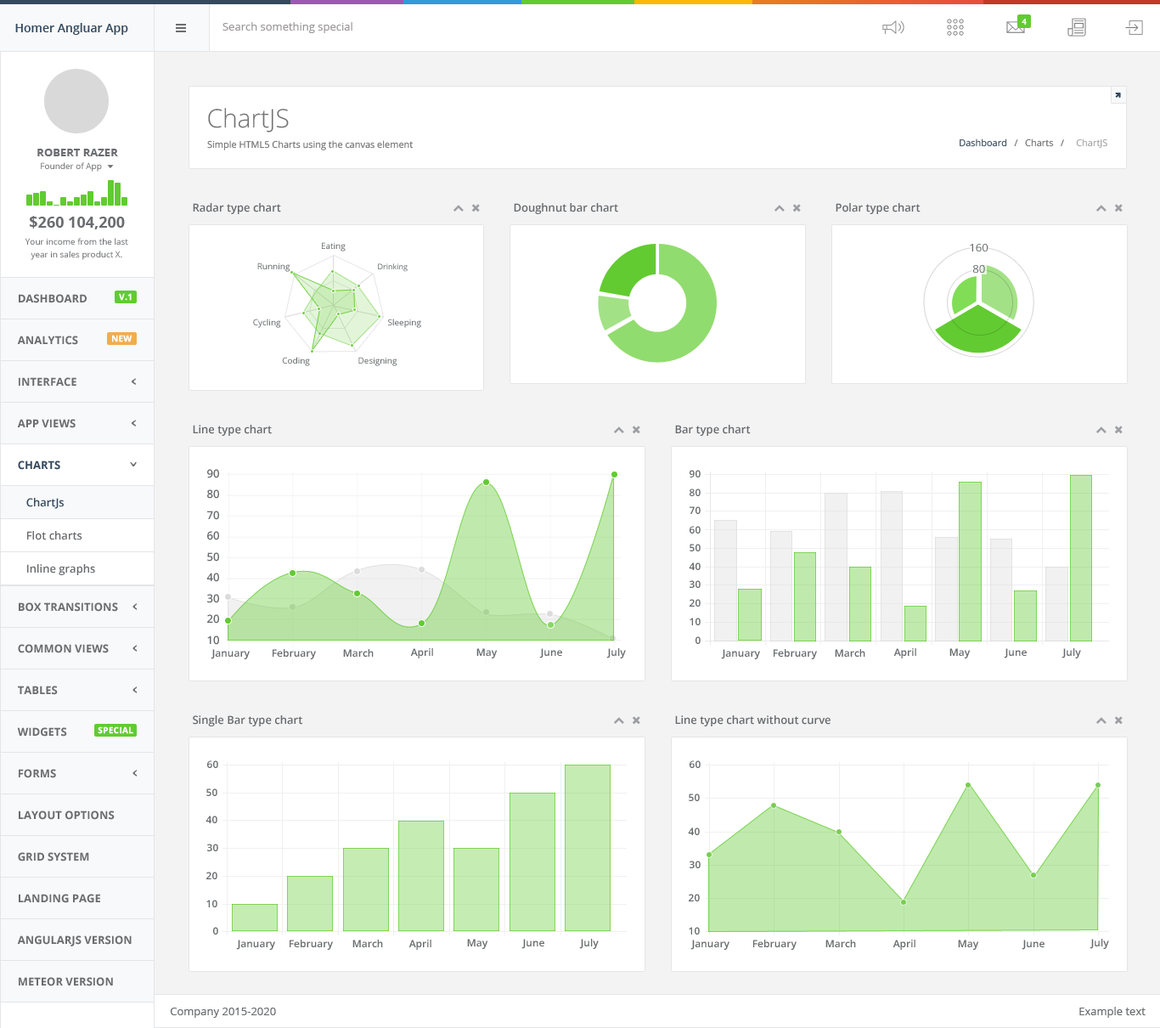
<style>
.page{position:relative;width:1160px;height:1028px;background:#ffffff}
.page>*{position:absolute;margin:0}
.t1{font:11.9px "OpenSans-Semibold";color:#34495e}
.t2{font:11px "OpenSans";color:#9c9999}
.t3{font:8.5px "OpenSans-Bold";color:#ffffff}
.t4{font:25.5px "OpenSans-Light";color:#727173}
.t5{font:11px "OpenSans-Bold";color:#6a6c6f}
.t6{font:9.3px "OpenSans";color:#727173}
.t7{font:9.3px "OpenSans";color:#3c4d60}
.t8{font:9.3px "OpenSans";color:#a5a6a9}
.t9{font:8.5px "OpenSans";color:#6a6c6f}
.t10{font:11px "OpenSans-Semibold";color:#676a6c}
.t11{font:15.3px "OpenSans-Bold";color:#6a6c6f}
.t12{font:8.5px/12.7px "OpenSans";color:#6a6c6f}
.t13{font:8.5px "OpenSans";color:#676a6c}
.t14{font:10.7px "OpenSans";color:#676a6c;scale:1.05 1}
.t15{font:7.6px "OpenSans"}
.t16{font:8.5px "OpenSans-Bold";color:#ffffff;font-weight:bold}
.t17{font:11px "OpenSans-Bold";color:#34495e}
.t18{font:10.2px "OpenSans-Semibold";color:#676a6c}
.t19{font:11px "OpenSans-Semibold";color:#34495e}
.t20{font:11px "OpenSans-Semibold";color:#6a6c6f}
.t21{font:11px "OpenSans";color:#6a6c6f}
</style>
<div class="page">
<p class="t1" style="left:15px;top:23px;width:113px;height:12px">Homer Angluar App</p>
<p class="t2" style="left:223px;top:22px;width:129px;height:11px">Search something special</p>
<p class="t3" style="left:1022px;top:19px;width:5px;height:6px">4</p>
<p class="t4" style="left:208px;top:108px;width:81px;height:25px">ChartJS</p>
<p class="t5" style="left:37px;top:149px;width:81px;height:7px">ROBERT RAZER</p>
<p class="t6" style="left:207px;top:140px;width:207px;height:10px">Simple HTML5 Charts using the canvas element</p>
<p class="t6" style="left:960px;top:138px;width:148px;height:11px"><span class="t7">Dashboard</span>   /   Charts   /    <span class="t8"> ChartJS</span></p>
<p class="t9" style="left:41px;top:162px;width:61px;height:10px">Founder of App</p>
<p class="t10" style="left:193px;top:203px;width:88px;height:11px">Radar type chart</p>
<p class="t10" style="left:514px;top:203px;width:104px;height:11px">Doughnut bar chart</p>
<p class="t10" style="left:836px;top:203px;width:85px;height:11px">Polar type chart</p>
<p class="t11" style="left:30px;top:216px;width:95px;height:13px">$260 104,200</p>
<p class="t12" style="left:25px;top:238px;width:103px;height:22px;text-align:center">Your income from the last<br>year in sales product X.</p>
<p class="t13" style="left:322px;top:242px;width:24px;height:9px">Eating</p>
<p class="t14" style="left:970px;top:244px;width:19px;height:7px">160</p>
<p class="t13" style="left:257px;top:262px;width:33px;height:10px">Running</p>
<p class="t15" style="left:378px;top:263px;width:30px;height:9px">Drinking</p>
<p class="t14" style="left:973px;top:265px;width:12px;height:8px">80</p>
<p class="t5" style="left:19px;top:294px;width:68px;height:9px">DASHBOARD</p>
<p class="t16" style="left:119px;top:293px;width:13px;height:8px">V.1</p>
<p class="t13" style="left:253px;top:319px;width:28px;height:9px">Cycling</p>
<p class="t13" style="left:388px;top:319px;width:33px;height:9px">Sleeping</p>
<p class="t5" style="left:17px;top:336px;width:61px;height:9px">ANALYTICS</p>
<p class="t16" style="left:112px;top:335px;width:21px;height:7px">NEW</p>
<p class="t13" style="left:282px;top:357px;width:28px;height:9px">Coding</p>
<p class="t13" style="left:358px;top:357px;width:40px;height:9px">Designing</p>
<p class="t5" style="left:19px;top:377px;width:57px;height:9px">INTERFACE</p>
<p class="t5" style="left:17px;top:419px;width:59px;height:9px">APP VIEWS</p>
<p class="t10" style="left:193px;top:425px;width:79px;height:11px">Line type chart</p>
<p class="t10" style="left:675px;top:425px;width:76px;height:11px">Bar type chart</p>
<p class="t17" style="left:18px;top:460px;width:42px;height:10px">CHARTS</p>
<p class="t10" style="left:207px;top:469px;width:12px;height:9px">90</p>
<p class="t18" style="left:690px;top:470px;width:11px;height:7px">90</p>
<p class="t19" style="left:26px;top:498px;width:38px;height:11px">ChartJs</p>
<p class="t10" style="left:207px;top:489px;width:12px;height:10px">80</p>
<p class="t18" style="left:690px;top:488px;width:11px;height:8px">80</p>
<p class="t18" style="left:690px;top:506px;width:11px;height:8px">70</p>
<p class="t10" style="left:207px;top:510px;width:12px;height:10px">70</p>
<p class="t20" style="left:27px;top:531px;width:55px;height:9px">Flot charts</p>
<p class="t10" style="left:207px;top:531px;width:12px;height:9px">60</p>
<p class="t18" style="left:690px;top:526px;width:11px;height:7px">60</p>
<p class="t18" style="left:690px;top:544px;width:11px;height:7px">50</p>
<p class="t10" style="left:207px;top:552px;width:12px;height:9px">50</p>
<p class="t20" style="left:27px;top:564px;width:68px;height:11px">Inline graphs</p>
<p class="t18" style="left:689px;top:562px;width:12px;height:8px">40</p>
<p class="t10" style="left:206px;top:572px;width:13px;height:10px">40</p>
<p class="t18" style="left:690px;top:580px;width:11px;height:8px">30</p>
<p class="t10" style="left:207px;top:594px;width:12px;height:9px">30</p>
<p class="t5" style="left:19px;top:602px;width:99px;height:10px">BOX TRANSITIONS</p>
<p class="t18" style="left:690px;top:599px;width:11px;height:7px">20</p>
<p class="t10" style="left:207px;top:614px;width:12px;height:9px">20</p>
<p class="t18" style="left:690px;top:617px;width:11px;height:8px">10</p>
<p class="t10" style="left:207px;top:635px;width:12px;height:10px">10</p>
<p class="t18" style="left:696px;top:636px;width:5px;height:8px">0</p>
<p class="t5" style="left:18px;top:644px;width:91px;height:9px">COMMON VIEWS</p>
<p class="t18" style="left:211px;top:649px;width:39px;height:10px">January</p>
<p class="t18" style="left:273px;top:649px;width:43px;height:10px">February</p>
<p class="t18" style="left:343px;top:649px;width:31px;height:8px">March</p>
<p class="t18" style="left:410px;top:648px;width:23px;height:10px">April</p>
<p class="t18" style="left:476px;top:648px;width:22px;height:10px">May</p>
<p class="t18" style="left:539px;top:648px;width:23px;height:10px">June</p>
<p class="t18" style="left:606px;top:648px;width:20px;height:10px">July</p>
<p class="t18" style="left:721px;top:649px;width:39px;height:10px">January</p>
<p class="t18" style="left:774px;top:649px;width:43px;height:10px">February</p>
<p class="t18" style="left:835px;top:649px;width:31px;height:8px">March</p>
<p class="t18" style="left:894px;top:648px;width:22px;height:10px">April</p>
<p class="t18" style="left:950px;top:648px;width:21px;height:10px">May</p>
<p class="t18" style="left:1004px;top:648px;width:23px;height:10px">June</p>
<p class="t18" style="left:1062px;top:648px;width:19px;height:10px">July</p>
<p class="t5" style="left:18px;top:685px;width:40px;height:10px">TABLES</p>
<p class="t10" style="left:193px;top:715px;width:109px;height:11px">Single Bar type chart</p>
<p class="t10" style="left:675px;top:715px;width:156px;height:11px">Line type chart without curve</p>
<p class="t5" style="left:17px;top:727px;width:50px;height:9px">WIDGETS</p>
<p class="t16" style="left:98px;top:726px;width:35px;height:8px">SPECIAL</p>
<p class="t18" style="left:207px;top:760px;width:11px;height:8px">60</p>
<p class="t18" style="left:690px;top:760px;width:11px;height:8px">60</p>
<p class="t5" style="left:19px;top:769px;width:37px;height:9px">FORMS</p>
<p class="t18" style="left:206px;top:788px;width:11px;height:8px">50</p>
<p class="t18" style="left:689px;top:793px;width:11px;height:8px">50</p>
<p class="t5" style="left:19px;top:810px;width:96px;height:10px">LAYOUT OPTIONS</p>
<p class="t18" style="left:206px;top:815px;width:11px;height:8px">40</p>
<p class="t18" style="left:688px;top:827px;width:12px;height:8px">40</p>
<p class="t18" style="left:207px;top:843px;width:11px;height:8px">30</p>
<p class="t5" style="left:18px;top:852px;width:71px;height:9px">GRID SYSTEM</p>
<p class="t18" style="left:690px;top:860px;width:11px;height:8px">30</p>
<p class="t18" style="left:206px;top:871px;width:11px;height:8px">20</p>
<p class="t5" style="left:19px;top:894px;width:81px;height:9px">LANDING PAGE</p>
<p class="t18" style="left:689px;top:894px;width:11px;height:7px">20</p>
<p class="t18" style="left:206px;top:899px;width:11px;height:8px">10</p>
<p class="t18" style="left:213px;top:927px;width:5px;height:7px">0</p>
<p class="t18" style="left:689px;top:927px;width:11px;height:7px">10</p>
<p class="t5" style="left:17px;top:935px;width:115px;height:11px">ANGULARJS VERSION</p>
<p class="t18" style="left:236px;top:939px;width:39px;height:11px">January</p>
<p class="t18" style="left:290px;top:939px;width:43px;height:11px">February</p>
<p class="t18" style="left:352px;top:939px;width:31px;height:8px">March</p>
<p class="t18" style="left:409px;top:939px;width:22px;height:11px">April</p>
<p class="t18" style="left:467px;top:939px;width:21px;height:10px">May</p>
<p class="t18" style="left:522px;top:939px;width:22px;height:10px">June</p>
<p class="t18" style="left:579px;top:939px;width:20px;height:10px">July</p>
<p class="t18" style="left:691px;top:939px;width:39px;height:11px">January</p>
<p class="t18" style="left:753px;top:939px;width:44px;height:11px">February</p>
<p class="t18" style="left:826px;top:939px;width:30px;height:8px">March</p>
<p class="t18" style="left:893px;top:939px;width:23px;height:11px">April</p>
<p class="t18" style="left:958px;top:939px;width:21px;height:11px">May</p>
<p class="t18" style="left:1022px;top:939px;width:23px;height:11px">June</p>
<p class="t18" style="left:1090px;top:939px;width:19px;height:10px">July</p>
<p class="t5" style="left:19px;top:977px;width:94px;height:9px">METEOR VERSION</p>
<p class="t21" style="left:170px;top:1007px;width:106px;height:11px">Company 2015-2020</p>
<p class="t21" style="left:1080px;top:1007px;width:66px;height:11px">Example text</p>
</div>
